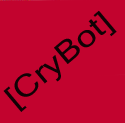
<style>
.page{position:relative;width:125px;height:123px;background:#c2032e}
.page>*{position:absolute;margin:0}
.t1{font:30px "MicrosoftSansSerif";color:#110205;scale:1.2 1}
</style>
<div class="page">
<p class="t1" style="left:3px;top:10px;width:114px;height:102px;rotate:-40deg">[CryBot]</p>
</div>
